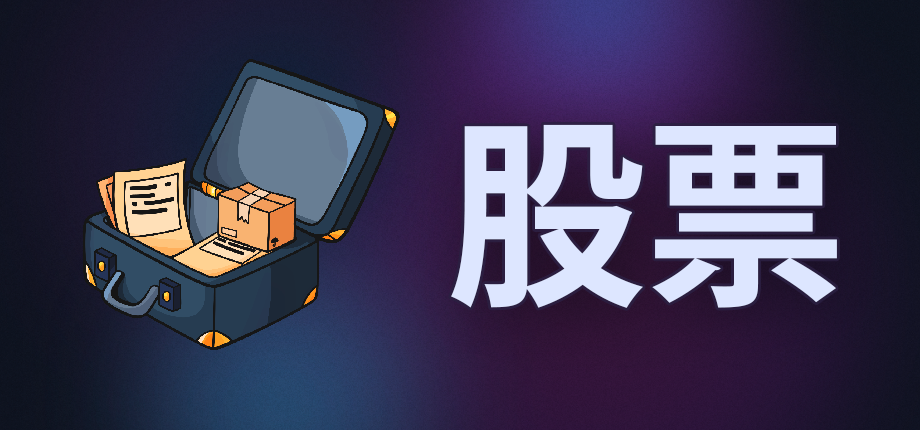
<style>
.page{position:relative;width:920px;height:430px}
.page>*{position:absolute;margin:0}
.t1{font:199.3px "KozGoPr6N-Bold";color:#dde6ff}
</style>
<div class="page">
<p class="t1" style="left:451px;top:124px;width:386px;height:184px">股票</p>
</div>
